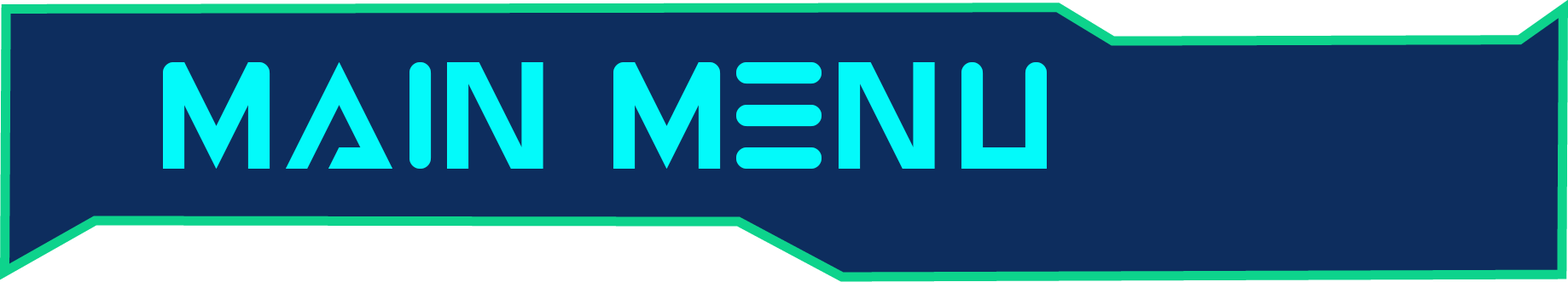
<style>
.page{position:relative;width:1568px;height:282px;background:#0d2d5e}
.page>*{position:absolute;margin:0}
.t1{font:106.6px "Astro";color:#03fafa}
</style>
<div class="page">
<p class="t1" style="left:163px;top:62px;width:884px;height:107px">MAIN MENU</p>
</div>
